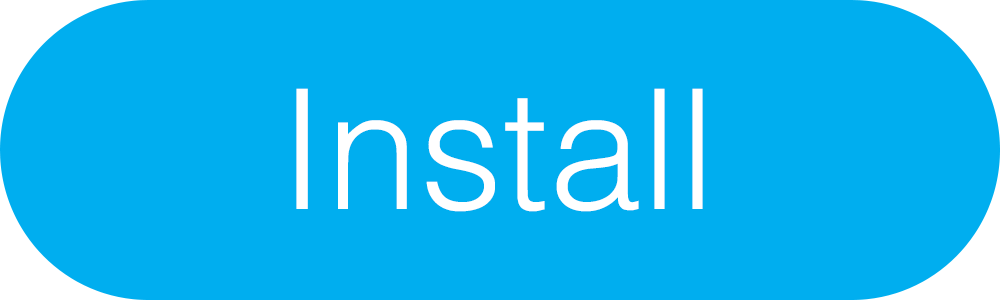
<style>
.page{position:relative;width:1000px;height:300px;background:#00aeef}
.page>*{position:absolute;margin:0}
.t1{font:167.1px "Helvetica-Light";color:#ffffff}
</style>
<div class="page">
<p class="t1" style="left:296px;top:88px;width:407px;height:124px">Install</p>
</div>
